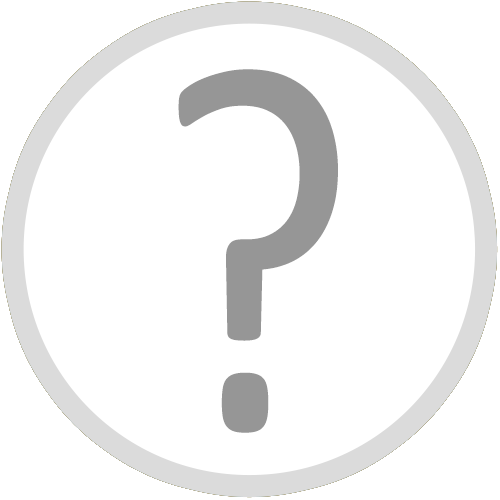
<style>
.page{position:relative;width:500px;height:500px;background:#ffffff}
.page>*{position:absolute;margin:0}
.t1{font:537.5px "Calibri";color:#969696;scale:0.84 1}
</style>
<div class="page">
<p class="t1" style="left:178px;top:69px;width:160px;height:364px">?</p>
</div>
